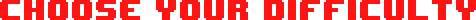
<style>
.page{position:relative;width:476px;height:20px;background:#ff1313}
.page>*{position:absolute;margin:0}
.t1{font:24px "8BITWONDERNominal";color:#ff1313}
</style>
<div class="page">
<p class="t1" style="left:0px;top:0px;width:476px;height:20px">Choose your Difficulty</p>
</div>
